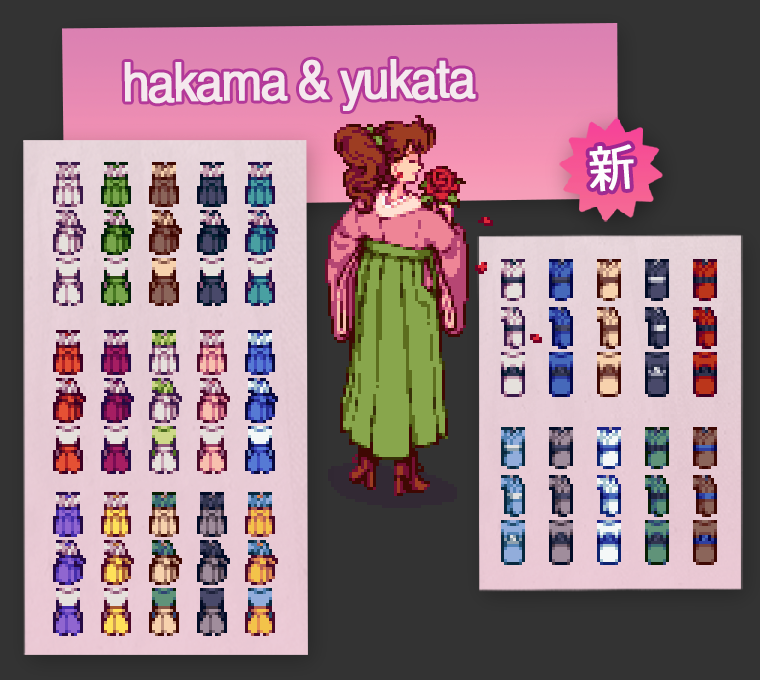
<style>
.page{position:relative;width:760px;height:680px}
.page>*{position:absolute;margin:0}
.t1{font:54px "Helvetica";letter-spacing:-0.06em;color:#f5e9ee;font-weight:bold;scale:0.9 1}
.t2{font:50px "Meiryo";letter-spacing:-0.05em;color:#fefefe;font-weight:bold;scale:0.9 1}
</style>
<div class="page">
<p class="t1" style="left:124px;top:59px;width:352px;height:52px;rotate:-1deg">hakama &amp; yukata</p>
<p class="t2" style="left:589px;top:144px;width:45px;height:48px;rotate:-4deg">新</p>
</div>
